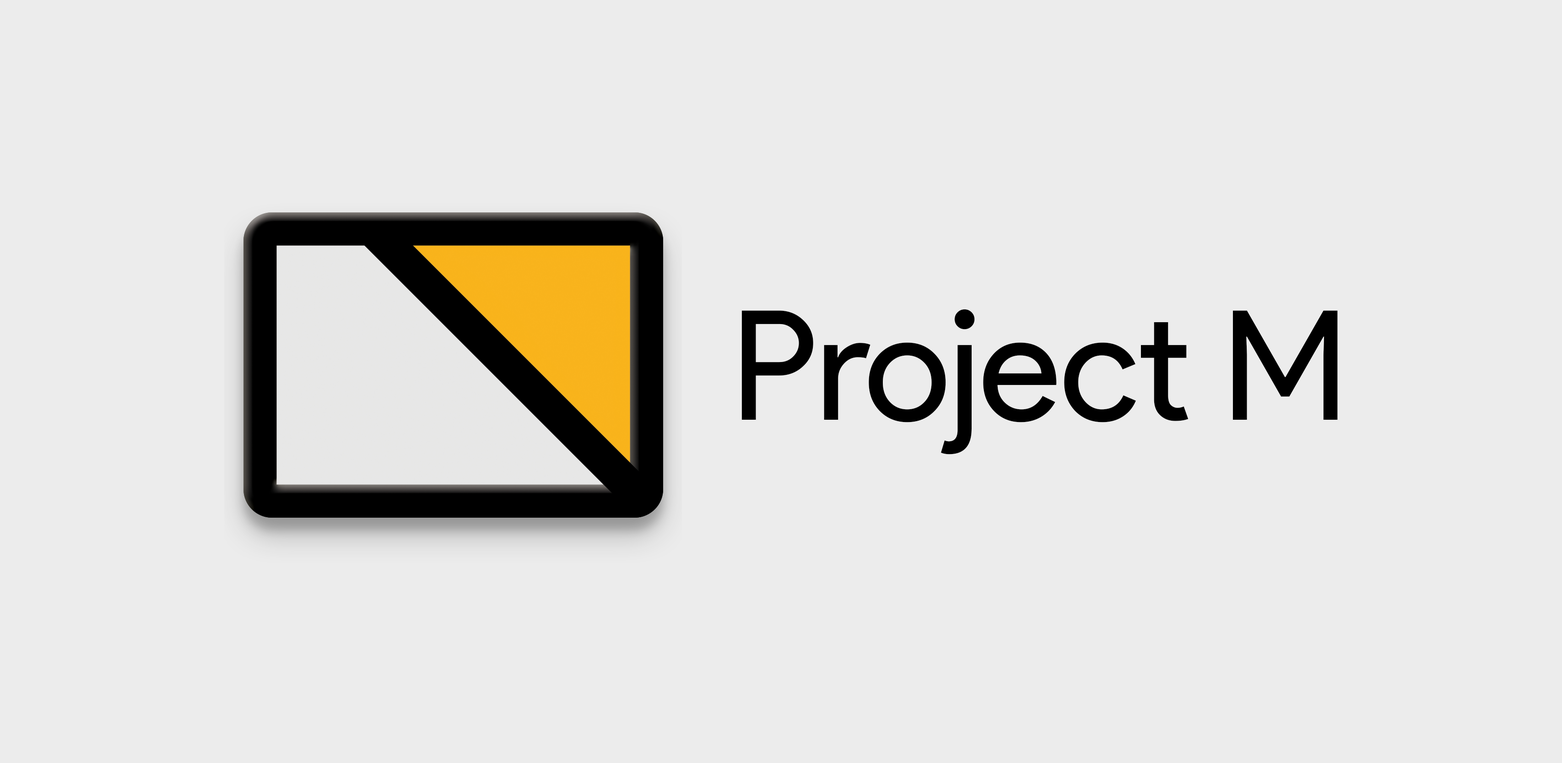
<style>
.page{position:relative;width:1562px;height:763px;background:#ececec}
.page>*{position:absolute;margin:0}
.t1{font:152.6px "ProductSans-Regular";letter-spacing:-0.01em;color:#000000}
</style>
<div class="page">
<p class="t1" style="left:742px;top:309px;width:596px;height:146px">Project M</p>
</div>
